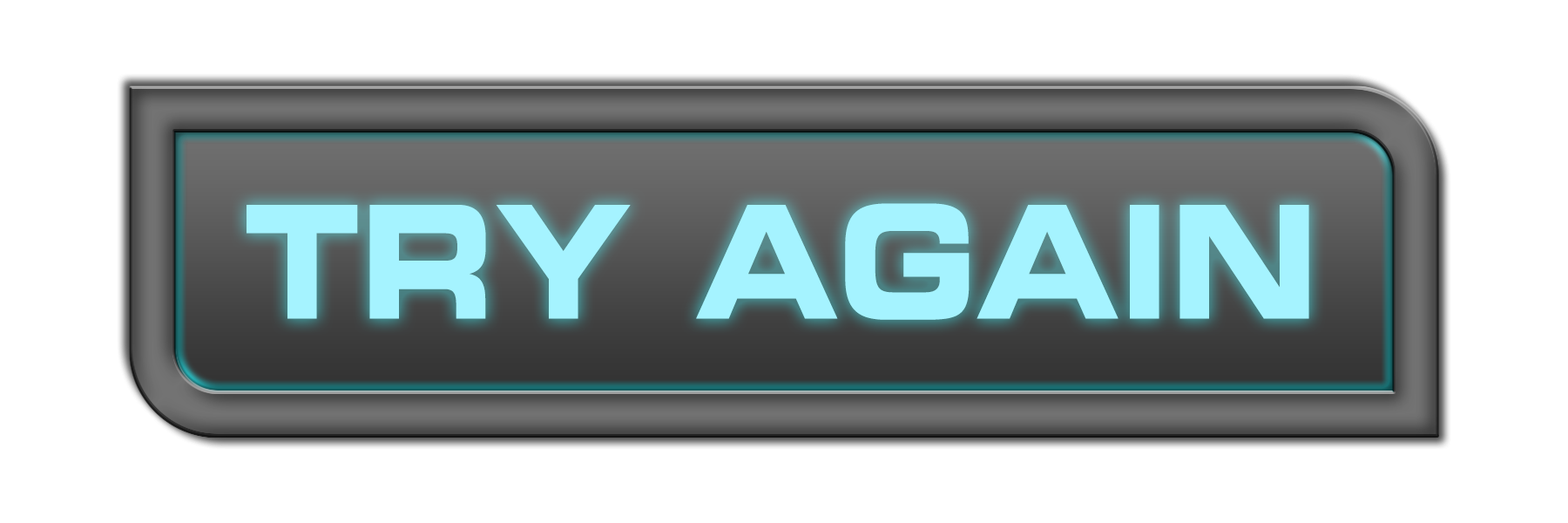
<style>
.page{position:relative;width:1568px;height:523px;background:#ffffff}
.page>*{position:absolute;margin:0}
.t1{font:156.8px "EurostileLTStd-BoldEx2";color:#a5f3ff;scale:0.83 1}
</style>
<div class="page">
<p class="t1" style="left:247px;top:203px;width:1062px;height:117px">TRY AGAIN</p>
</div>
